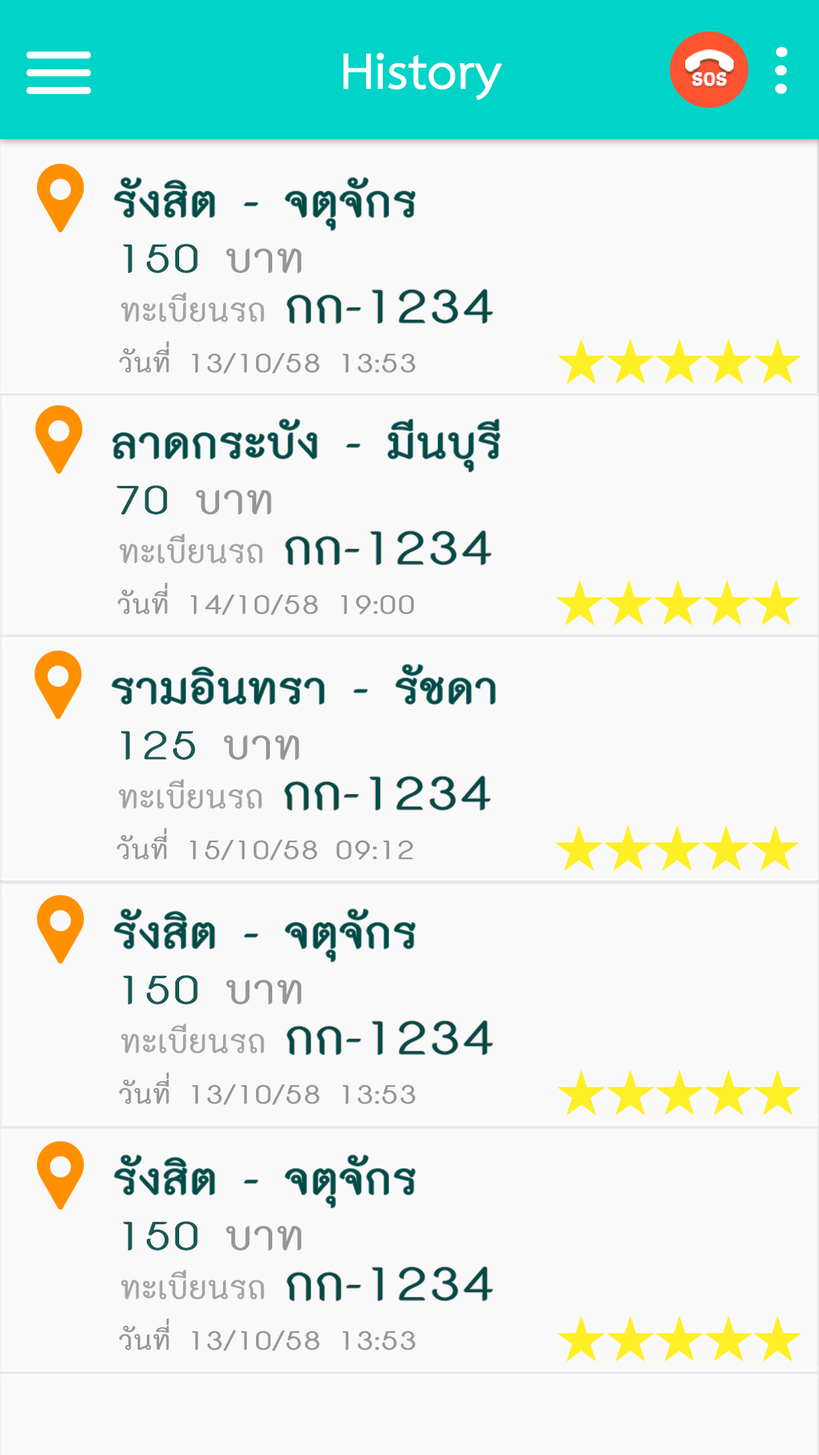
<style>
.page{position:relative;width:819px;height:1455px;background:#faf9fa}
.page>*{position:absolute;margin:0}
.t1{font:73.4px "THSarabunPSK-Bold";color:#ffffff}
.t2{font:17.7px "GothicAXHand-Regular";color:#ffffff}
.t3{font:62.2px "THK2DJuly8-Bold";color:#004b47}
.t4{font:59.3px "THK2DJuly8-Bold";color:#175855}
.t5{font:59.3px "THK2DJuly8-Bold";color:#969696}
.t6{font:47px "THK2DJuly8-Bold";color:#a4a4a4;scale:0.94 1}
.t7{font:68.4px "THK2DJuly8-Bold";color:#004b47}
.t8{font:38.7px "THK2DJuly8-Bold";color:#969696}
</style>
<div class="page">
<p class="t1" style="left:343px;top:52px;width:159px;height:48px">History</p>
<p class="t2" style="left:692px;top:72px;width:35px;height:14px">SOS</p>
<p class="t3" style="left:115px;top:178px;width:300px;height:53px">รังสิต - จตุจักร</p>
<p class="t4" style="left:123px;top:244px;width:179px;height:29px">150<span class="t5"> บาท</span></p>
<p class="t6" style="left:121px;top:292px;width:144px;height:30px">ทะเบียนรถ</p>
<p class="t7" style="left:287px;top:289px;width:206px;height:35px">กก-1234</p>
<p class="t8" style="left:119px;top:341px;width:296px;height:33px">วันที่ 13/10/58 13:53</p>
<p class="t3" style="left:113px;top:419px;width:387px;height:53px">ลาดกระบัง - มีนบุรี</p>
<p class="t5" style="left:116px;top:485px;width:156px;height:30px"><span class="t4">70</span> บาท</p>
<p class="t6" style="left:119px;top:534px;width:144px;height:30px">ทะเบียนรถ</p>
<p class="t7" style="left:285px;top:531px;width:207px;height:34px">กก-1234</p>
<p class="t8" style="left:118px;top:582px;width:296px;height:33px">วันที่ 14/10/58 19:00</p>
<p class="t3" style="left:112px;top:665px;width:383px;height:40px">รามอินทรา - รัชดา</p>
<p class="t4" style="left:121px;top:731px;width:178px;height:29px">125<span class="t5"> บาท</span></p>
<p class="t6" style="left:118px;top:779px;width:144px;height:30px">ทะเบียนรถ</p>
<p class="t7" style="left:285px;top:776px;width:206px;height:35px">กก-1234</p>
<p class="t8" style="left:117px;top:828px;width:296px;height:33px">วันที่ 15/10/58 09:12</p>
<p class="t3" style="left:115px;top:909px;width:300px;height:53px">รังสิต - จตุจักร</p>
<p class="t4" style="left:123px;top:975px;width:179px;height:30px">150<span class="t5"> บาท</span></p>
<p class="t6" style="left:121px;top:1024px;width:144px;height:30px">ทะเบียนรถ</p>
<p class="t7" style="left:287px;top:1021px;width:206px;height:34px">กก-1234</p>
<p class="t8" style="left:119px;top:1072px;width:296px;height:33px">วันที่ 13/10/58 13:53</p>
<p class="t3" style="left:115px;top:1155px;width:300px;height:54px">รังสิต - จตุจักร</p>
<p class="t4" style="left:123px;top:1222px;width:179px;height:29px">150<span class="t5"> บาท</span></p>
<p class="t6" style="left:121px;top:1270px;width:144px;height:30px">ทะเบียนรถ</p>
<p class="t7" style="left:287px;top:1267px;width:206px;height:35px">กก-1234</p>
<p class="t8" style="left:119px;top:1319px;width:296px;height:33px">วันที่ 13/10/58 13:53</p>
</div>
